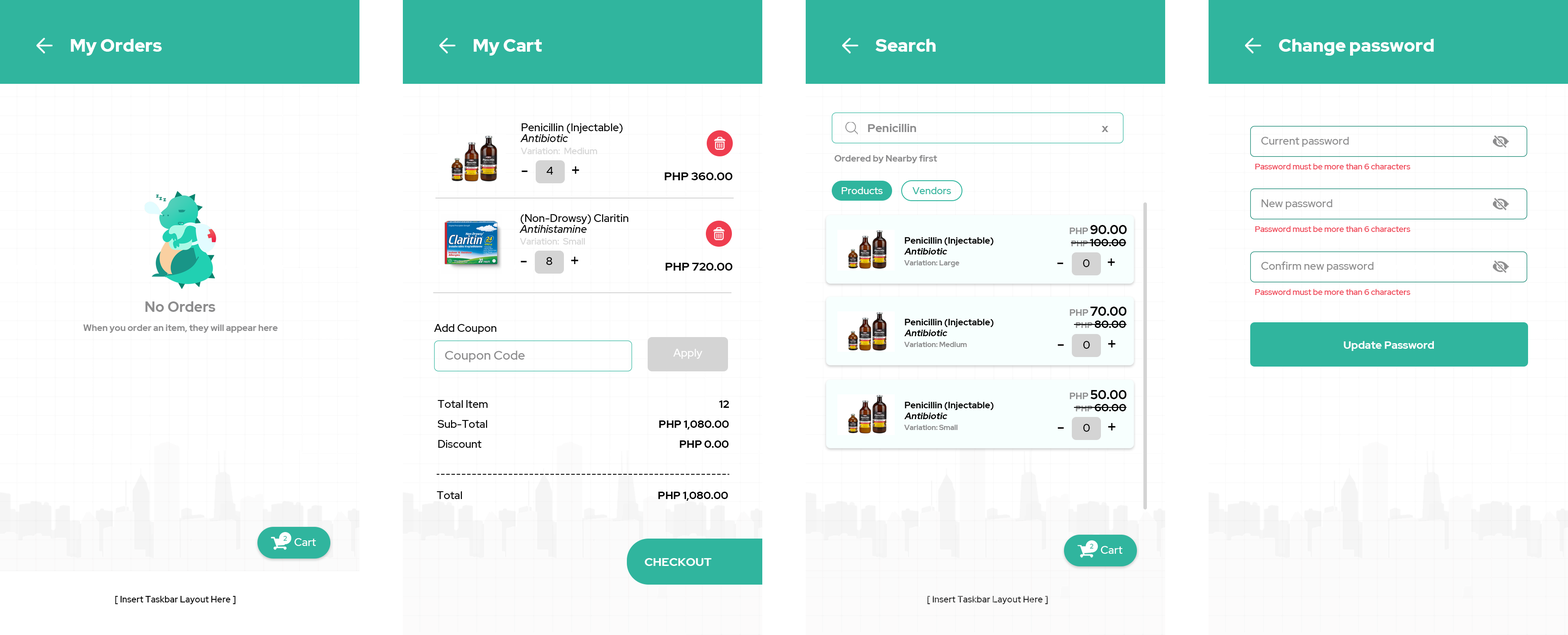
<style>
.page{position:relative;width:1568px;height:635px;background:#ffffff}
.page>*{position:absolute;margin:0}
.t1{font:18px "RedHatDisplay-Black";color:#ffffff}
.t2{font:10.9px/10.9px "RedHatDisplay-Medium";color:#000000}
.t3{font:10.9px/10.9px "RedHatDisplay-MediumItalic";color:#000000}
.t4{font:11.8px "RedHatDisplay-Bold";color:#8c8c8d}
.t5{font:10.9px "RedHatDisplay-Medium";color:#8c8c8d}
.t6{font:9px "RedHatDisplay-Medium";color:#d4d4d4}
.t7{font:9.1px "RedHatDisplay-Bold";color:#8c8c8d}
.t8{font:16.3px "RedHatDisplay-Medium";color:#000000}
.t9{font:10.9px "RedHatDisplay-Medium";color:#000000}
.t10{font:11.8px "RedHatDisplay-Bold";color:#000000}
.t11{font:8.1px "RedHatDisplay-Medium";color:#ef3d4f}
.t12{font:10px "RedHatDisplay-Medium";color:#ffffff}
.t13{font:10px "RedHatDisplay-Medium";color:#30b59e}
.t14{font:10.8px "RedHatDisplay-Medium";color:#8c8c8d}
.t15{font:12.7px "RedHatDisplay-Bold";color:#000000}
.t16{font:9px "RedHatDisplay-Bold";color:#8c8c8d}
.t17{font:9px "RedHatDisplay-Bold";letter-spacing:0.002em;color:#8c8c8d}
.t18{font:12.7px "RedHatDisplay-Bold";letter-spacing:0.004em;color:#000000}
.t19{font:9px/10.9px "RedHatDisplay-Bold";color:#000000}
.t20{font:9px/10.9px "RedHatDisplay-Bold";color:#000000;font-style:italic}
.t21{font:10.9px "RedHatDisplay-Bold";color:#000000}
.t22{font:8.1px "RedHatDisplay-Bold";color:#8c8c8d}
.t23{font:8.1px "RedHatDisplay-Bold";letter-spacing:0.002em;color:#8c8c8d}
.t24{font:10.9px "RedHatDisplay-Bold";letter-spacing:0.004em;color:#000000}
.t25{font:7.2px "RedHatDisplay-Bold";color:#8c8c8d}
.t26{font:14.5px "RedHatDisplay-Bold";color:#8c8c8d}
.t27{font:10.9px "RedHatDisplay-Bold";color:#ffffff}
.t28{font:12.7px "RedHatDisplay-Medium";color:#8c8c8d}
.t29{font:10.9px "RedHatDisplay-Medium";color:#ffffff}
.t30{font:10.9px/19.9px "RedHatDisplay-Bold";color:#000000}
.t31{font:10.9px/19.9px "RedHatDisplay-Medium";color:#000000}
.t32{font:6.6px "RedHatDisplay-Medium";letter-spacing:0.004em;color:#30b59e}
.t33{font:10.9px "RedHatDisplay-Medium";letter-spacing:0.004em;color:#ffffff}
.t34{font:10.8px "RedHatDisplay-Medium";letter-spacing:0.004em;color:#ffffff}
.t35{font:11.8px "RedHatDisplay-Bold";color:#ffffff}
.t36{font:8.9px "RedHatDisplay-Medium";letter-spacing:0.004em;color:#000000}
.t37{font:8.9px "RedHatDisplay-Medium";letter-spacing:0.004em;color:#222222}
</style>
<div class="page">
<p class="t1" style="left:71px;top:39px;width:91px;height:17px">My Orders</p>
<p class="t1" style="left:474px;top:39px;width:68px;height:17px">My Cart</p>
<p class="t1" style="left:876px;top:39px;width:60px;height:13px">Search</p>
<p class="t1" style="left:1279px;top:39px;width:155px;height:17px">Change password</p>
<p class="t2" style="left:520px;top:123px;width:103px;height:19px">Penicillin (Injectable)<br><span class="t3">Antibiotic</span></p>
<p class="t4" style="left:868px;top:124px;width:240px;height:8px">Penicillin             x</p>
<p class="t5" style="left:1261px;top:137px;width:88px;height:10px">Current password</p>
<p class="t6" style="left:520px;top:147px;width:77px;height:7px">Variation:  Medium</p>
<p class="t7" style="left:834px;top:155px;width:103px;height:8px">Ordered by Nearby first</p>
<p class="t8" style="left:521px;top:166px;width:58px;height:8px">-    +</p>
<p class="t9" style="left:547px;top:167px;width:6px;height:8px">4</p>
<p class="t10" style="left:665px;top:172px;width:67px;height:8px">PHP 360.00</p>
<p class="t11" style="left:1255px;top:163px;width:155px;height:6px">Password must be more than 6 characters</p>
<p class="t12" style="left:842px;top:187px;width:41px;height:7px">Products</p>
<p class="t13" style="left:912px;top:187px;width:39px;height:7px">Vendors</p>
<p class="t14" style="left:1262px;top:199px;width:70px;height:10px">New password</p>
<p class="t2" style="left:519px;top:214px;width:110px;height:19px">(Non-Drowsy) Claritin <span class="t3">Antihistamine</span></p>
<p class="t15" style="left:1070px;top:225px;width:57px;height:9px"><span class="t16">PH</span><span class="t17">P </span><span class="t18">9</span>0.00</p>
<p class="t11" style="left:1255px;top:226px;width:155px;height:6px">Password must be more than 6 characters</p>
<p class="t6" style="left:520px;top:237px;width:65px;height:7px">Variation:  Small</p>
<p class="t19" style="left:904px;top:237px;width:90px;height:17px">Penicillin (Injectable)<br><span class="t20">Antibiotic</span></p>
<p class="t21" style="left:1071px;top:239px;width:55px;height:7px"><span class="t22">PH</span><span class="t23">P </span><span class="t24">10</span>0.00</p>
<p class="t8" style="left:520px;top:257px;width:58px;height:7px">-    +</p>
<p class="t9" style="left:546px;top:257px;width:6px;height:8px">8</p>
<p class="t10" style="left:665px;top:263px;width:67px;height:7px">PHP 720.00</p>
<p class="t25" style="left:904px;top:260px;width:55px;height:7px">Variation: Large</p>
<p class="t8" style="left:1057px;top:258px;width:58px;height:8px">-    +</p>
<p class="t9" style="left:1083px;top:259px;width:7px;height:8px">0</p>
<p class="t14" style="left:1261px;top:261px;width:113px;height:11px">Confirm new password</p>
<p class="t11" style="left:1255px;top:289px;width:155px;height:6px">Password must be more than 6 characters</p>
<p class="t26" style="left:145px;top:301px;width:70px;height:11px">No Orders</p>
<p class="t15" style="left:1070px;top:306px;width:57px;height:10px"><span class="t16">PH</span><span class="t17">P </span><span class="t18">7</span>0.00</p>
<p class="t16" style="left:83px;top:324px;width:195px;height:9px">When you order an item, they will appear here</p>
<p class="t9" style="left:434px;top:324px;width:63px;height:10px">Add Coupon</p>
<p class="t19" style="left:904px;top:319px;width:90px;height:17px">Penicillin (Injectable)<br><span class="t20">Antibiotic</span></p>
<p class="t21" style="left:1076px;top:320px;width:50px;height:8px"><span class="t22">PH</span><span class="t23">P </span><span class="t24">8</span>0.00</p>
<p class="t25" style="left:904px;top:341px;width:63px;height:6px">Variation: Medium</p>
<p class="t8" style="left:1057px;top:340px;width:59px;height:7px">-    +</p>
<p class="t9" style="left:1083px;top:341px;width:7px;height:8px">0</p>
<p class="t27" style="left:1344px;top:341px;width:90px;height:10px">Update Password</p>
<p class="t28" style="left:445px;top:350px;width:80px;height:12px">Coupon Code</p>
<p class="t29" style="left:673px;top:349px;width:29px;height:10px">Apply</p>
<p class="t15" style="left:1070px;top:390px;width:57px;height:9px"><span class="t16">PH</span><span class="t17">P </span><span class="t18">5</span>0.00</p>
<p class="t30" style="left:438px;top:400px;width:291px;height:48px"><span class="t31">Total Item                     </span>12<br><span class="t31">Sub-Total            </span>PHP 1,080.00<br><span class="t31">Discount                      </span>PHP 0.00</p>
<p class="t19" style="left:904px;top:402px;width:90px;height:17px">Penicillin (Injectable)<br><span class="t20">Antibiotic</span></p>
<p class="t21" style="left:1076px;top:404px;width:50px;height:7px"><span class="t22">PH</span><span class="t23">P </span><span class="t24">6</span>0.00</p>
<p class="t25" style="left:904px;top:424px;width:54px;height:6px">Variation: Small</p>
<p class="t8" style="left:1057px;top:423px;width:59px;height:7px">-    +</p>
<p class="t9" style="left:1083px;top:424px;width:7px;height:8px">0</p>
<p class="t21" style="left:437px;top:491px;width:291px;height:10px"><span class="t9">Total              </span>PHP 1,080.00</p>
<p class="t32" style="left:283px;top:536px;width:4px;height:4px">2</p>
<p class="t33" style="left:294px;top:538px;width:22px;height:8px">Cart</p>
<p class="t32" style="left:1090px;top:544px;width:4px;height:4px">2</p>
<p class="t34" style="left:1101px;top:546px;width:22px;height:7px">Cart</p>
<p class="t35" style="left:645px;top:558px;width:67px;height:8px">CHECKOUT</p>
<p class="t36" style="left:115px;top:595px;width:121px;height:9px">[ Insert Taskbar Layout Here ]</p>
<p class="t37" style="left:927px;top:595px;width:121px;height:9px">[ Insert Taskbar Layout Here ]</p>
</div>
